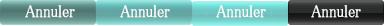
<style>
.page{position:relative;width:384px;height:26px}
.page>*{position:absolute;margin:0}
.t1{font:17.1px "MS-PMincho";color:#ffffff;font-weight:bold;scale:0.84 1}
</style>
<div class="page">
<p class="t1" style="left:25px;top:5px;width:50px;height:13px">Annuler</p>
<p class="t1" style="left:120px;top:5px;width:50px;height:13px">Annuler</p>
<p class="t1" style="left:216px;top:5px;width:50px;height:13px">Annuler</p>
<p class="t1" style="left:311px;top:5px;width:50px;height:13px">Annuler</p>
</div>
